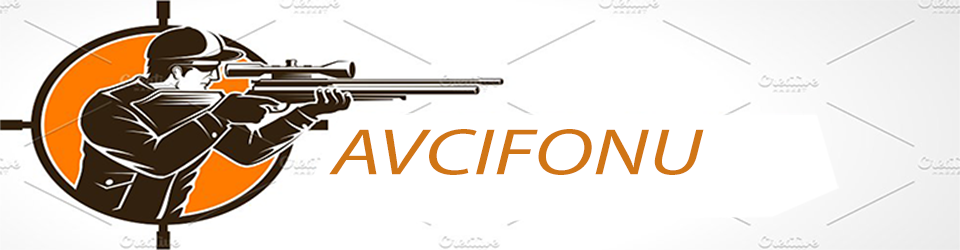
<style>
.page{position:relative;width:960px;height:250px;background:#ffffff}
.page>*{position:absolute;margin:0}
.t1{font:66.2px "MyriadPro-It";color:#d07515;scale:1.32 1}
</style>
<div class="page">
<p class="t1" style="left:329px;top:129px;width:375px;height:46px">AVCIFONU</p>
</div>
